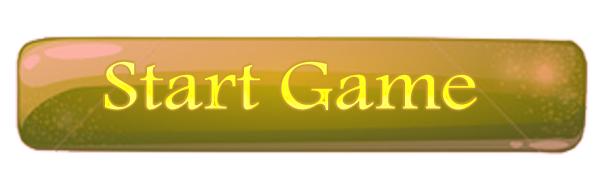
<style>
.page{position:relative;width:599px;height:193px;background:#ffffff}
.page>*{position:absolute;margin:0}
.t1{font:72.9px "K-Sina";scale:1.16 1}
</style>
<div class="page">
<p class="t1" style="left:105px;top:61px;width:372px;height:49px">Start Game</p>
</div>
